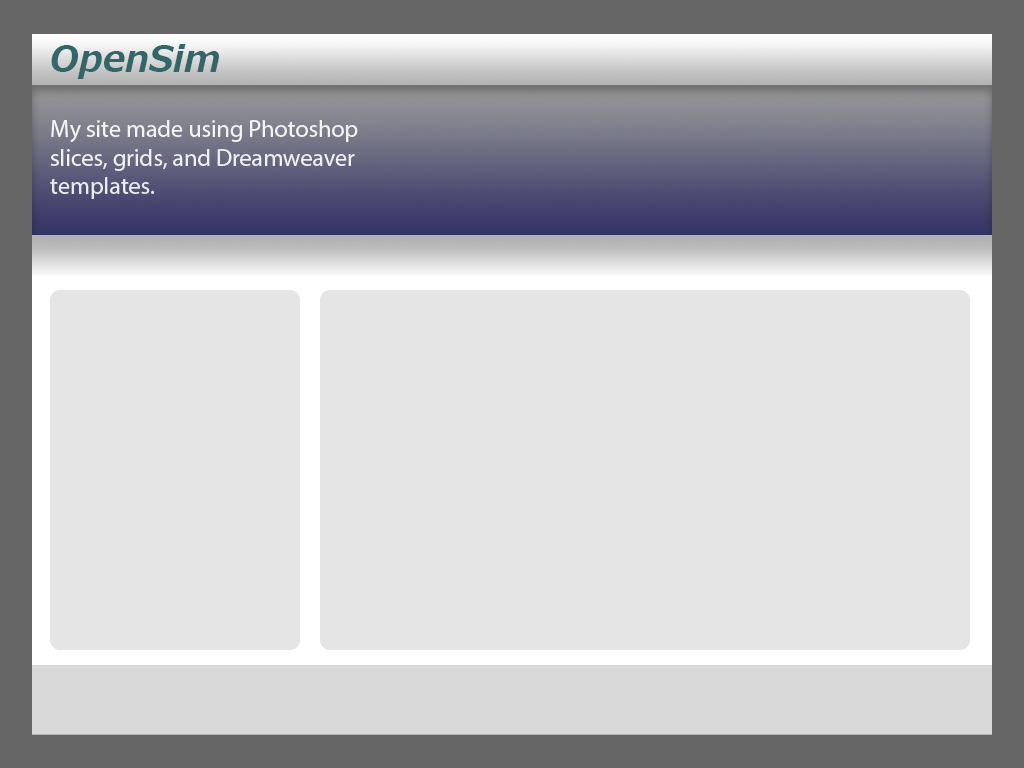
<style>
.page{position:relative;width:1024px;height:768px;background:#e5e5e5}
.page>*{position:absolute;margin:0}
.t1{font:36px "MeiryoUI-BoldItalic";color:#336666}
.t2{font:24px "MyriadPro-Regular";color:#ffffff}
</style>
<div class="page">
<p class="t1" style="left:51px;top:44px;width:168px;height:35px">OpenSim</p>
<p class="t2" style="left:50px;top:120px;width:308px;height:79px">My site made using Photoshop<br>slices, grids, and Dreamweaver <br>templates.</p>
</div>
